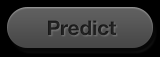
<style>
.page{position:relative;width:160px;height:57px;background:#000000}
.page>*{position:absolute;margin:0}
.t1{font:20.4px "HelveticaNeue-Bold";color:#252525}
</style>
<div class="page">
<p class="t1" style="left:48px;top:20px;width:68px;height:16px">Predict</p>
</div>
